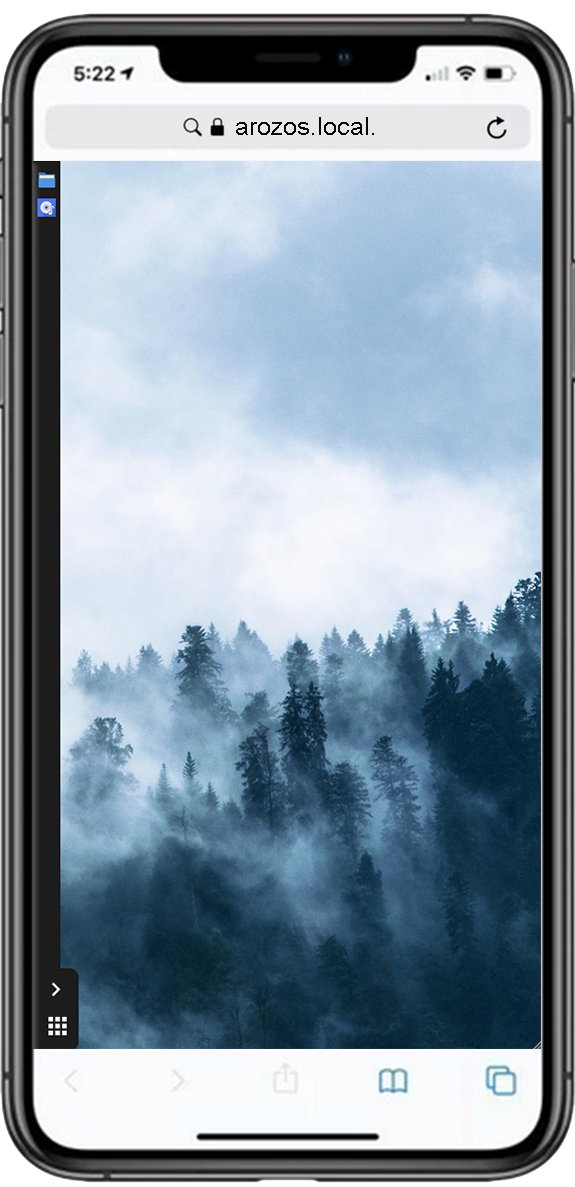
<style>
.page{position:relative;width:575px;height:1187px}
.page>*{position:absolute;margin:0}
.t1{font:25px "ArialMT";color:#0a090a}
</style>
<div class="page">
<p class="t1" style="left:236px;top:117px;width:138px;height:18px">arozos.local.</p>
</div>
